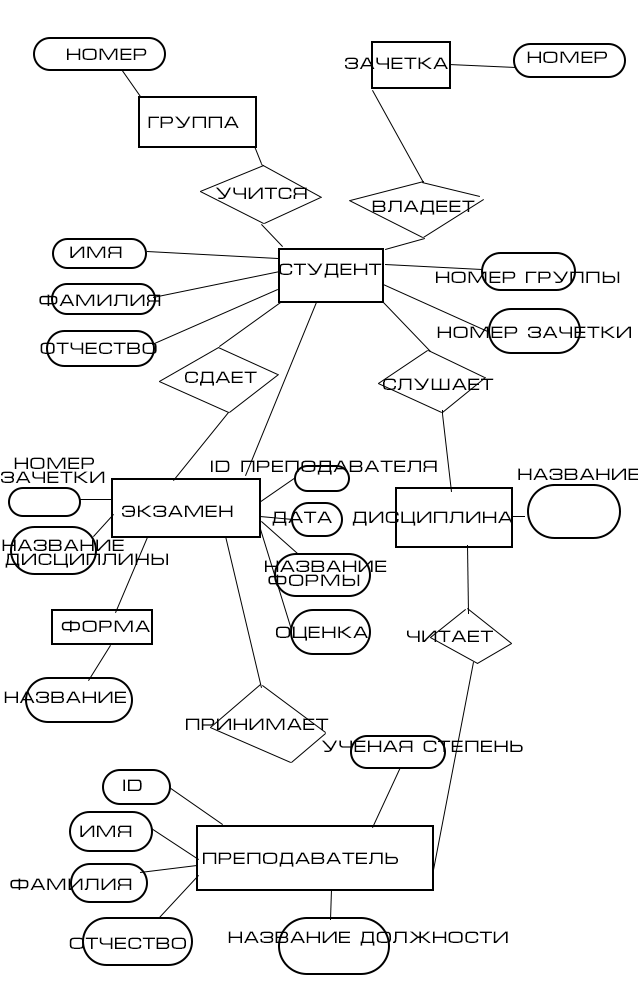
<style>
.page{position:relative;width:638px;height:998px;background:#ffffff}
.page>*{position:absolute;margin:0}
.t1{font:16.7px "Micra";color:#000000}
</style>
<div class="page">
<p class="t1" style="left:67px;top:48px;width:80px;height:12px">номер</p>
<p class="t1" style="left:527px;top:51px;width:80px;height:12px">номер</p>
<p class="t1" style="left:345px;top:57px;width:103px;height:12px">зачетка</p>
<p class="t1" style="left:148px;top:116px;width:91px;height:12px">группа</p>
<p class="t1" style="left:215px;top:187px;width:92px;height:12px">учится</p>
<p class="t1" style="left:372px;top:200px;width:103px;height:15px">владеет</p>
<p class="t1" style="left:70px;top:246px;width:52px;height:12px">имя</p>
<p class="t1" style="left:279px;top:263px;width:103px;height:15px">студент</p>
<p class="t1" style="left:436px;top:271px;width:184px;height:12px">номер группы</p>
<p class="t1" style="left:39px;top:294px;width:122px;height:12px">фамилия</p>
<p class="t1" style="left:437px;top:326px;width:194px;height:12px">номер зачетки</p>
<p class="t1" style="left:40px;top:342px;width:117px;height:12px">отчество</p>
<p class="t1" style="left:185px;top:371px;width:72px;height:15px">сдает</p>
<p class="t1" style="left:383px;top:378px;width:111px;height:12px">слушает</p>
<p class="t1" style="left:14px;top:457px;width:80px;height:12px">номер</p>
<p class="t1" style="left:211px;top:460px;width:226px;height:15px">id преподавателя</p>
<p class="t1" style="left:1px;top:471px;width:104px;height:12px">зачетки</p>
<p class="t1" style="left:518px;top:468px;width:122px;height:12px">название</p>
<p class="t1" style="left:122px;top:505px;width:111px;height:12px">экзамен</p>
<p class="t1" style="left:272px;top:511px;width:60px;height:15px">дата</p>
<p class="t1" style="left:352px;top:511px;width:161px;height:15px">дисциплина</p>
<p class="t1" style="left:2px;top:539px;width:122px;height:12px">название</p>
<p class="t1" style="left:5px;top:553px;width:163px;height:15px">дисциплины</p>
<p class="t1" style="left:265px;top:560px;width:122px;height:12px">название</p>
<p class="t1" style="left:268px;top:574px;width:92px;height:12px">формы</p>
<p class="t1" style="left:61px;top:620px;width:89px;height:12px">форма</p>
<p class="t1" style="left:276px;top:626px;width:92px;height:15px">оценка</p>
<p class="t1" style="left:407px;top:630px;width:86px;height:12px">читает</p>
<p class="t1" style="left:4px;top:691px;width:122px;height:12px">название</p>
<p class="t1" style="left:186px;top:718px;width:143px;height:12px">принимает</p>
<p class="t1" style="left:321px;top:740px;width:202px;height:12px">ученая степень</p>
<p class="t1" style="left:123px;top:779px;width:19px;height:12px">id</p>
<p class="t1" style="left:80px;top:825px;width:52px;height:12px">имя</p>
<p class="t1" style="left:203px;top:852px;width:195px;height:15px">преподаватель</p>
<p class="t1" style="left:10px;top:878px;width:122px;height:12px">фамилия</p>
<p class="t1" style="left:69px;top:937px;width:117px;height:12px">отчество</p>
<p class="t1" style="left:228px;top:931px;width:280px;height:15px">название должности</p>
</div>
